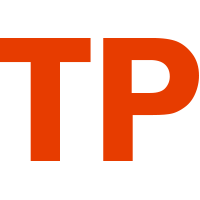
<style>
.page{position:relative;width:200px;height:200px;background:#ffffff}
.page>*{position:absolute;margin:0}
.t1{font:185px "FranklinGothic-Demi";color:#e73c00}
</style>
<div class="page">
<p class="t1" style="left:0px;top:38px;width:199px;height:123px">TP</p>
</div>
